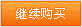
<style>
.page{position:relative;width:82px;height:27px}
.page>*{position:absolute;margin:0}
.t1{font:12px "SimSun";letter-spacing:0.05em;color:#ffffff}
</style>
<div class="page">
<p class="t1" style="left:16px;top:8px;width:49px;height:11px">继续购买</p>
</div>
